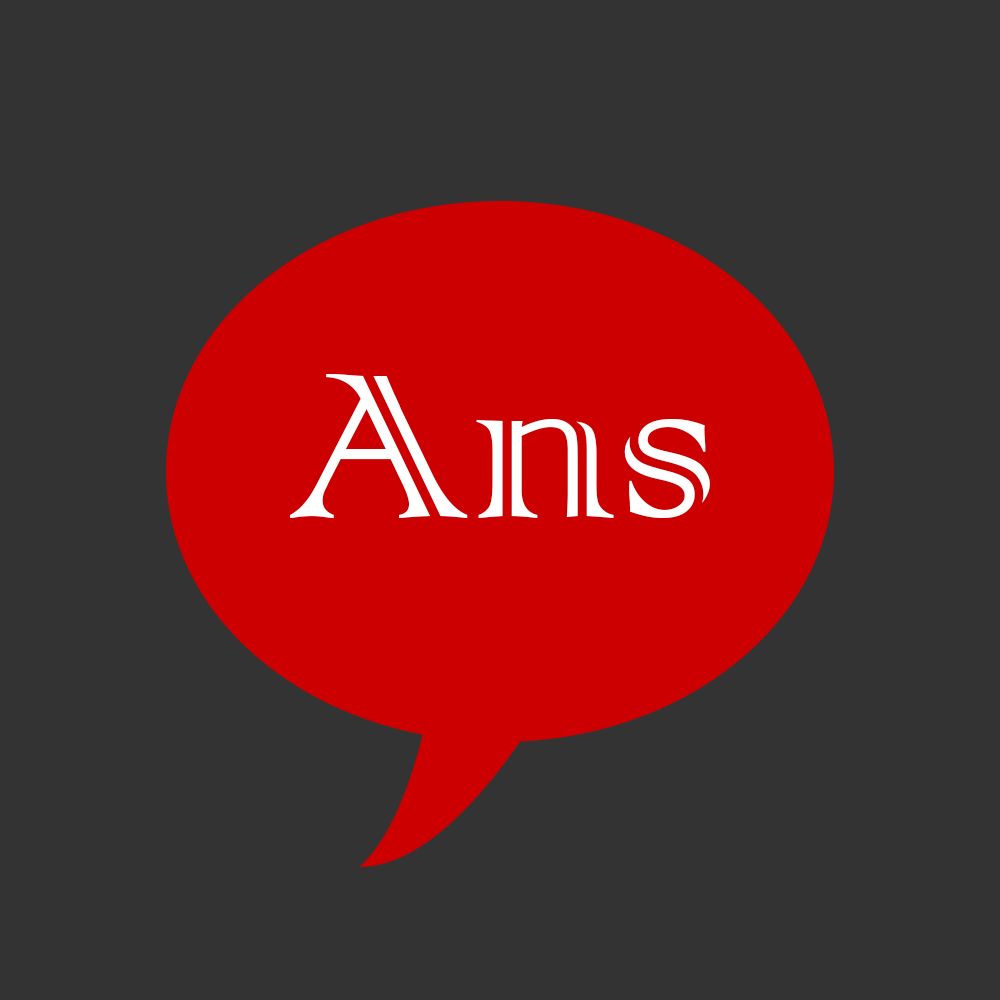
<style>
.page{position:relative;width:1000px;height:1000px;background:#333333}
.page>*{position:absolute;margin:0}
.t1{font:272.2px "ColonnaMT";color:#ffffff}
</style>
<div class="page">
<p class="t1" style="left:290px;top:374px;width:420px;height:144px">Ans</p>
</div>
